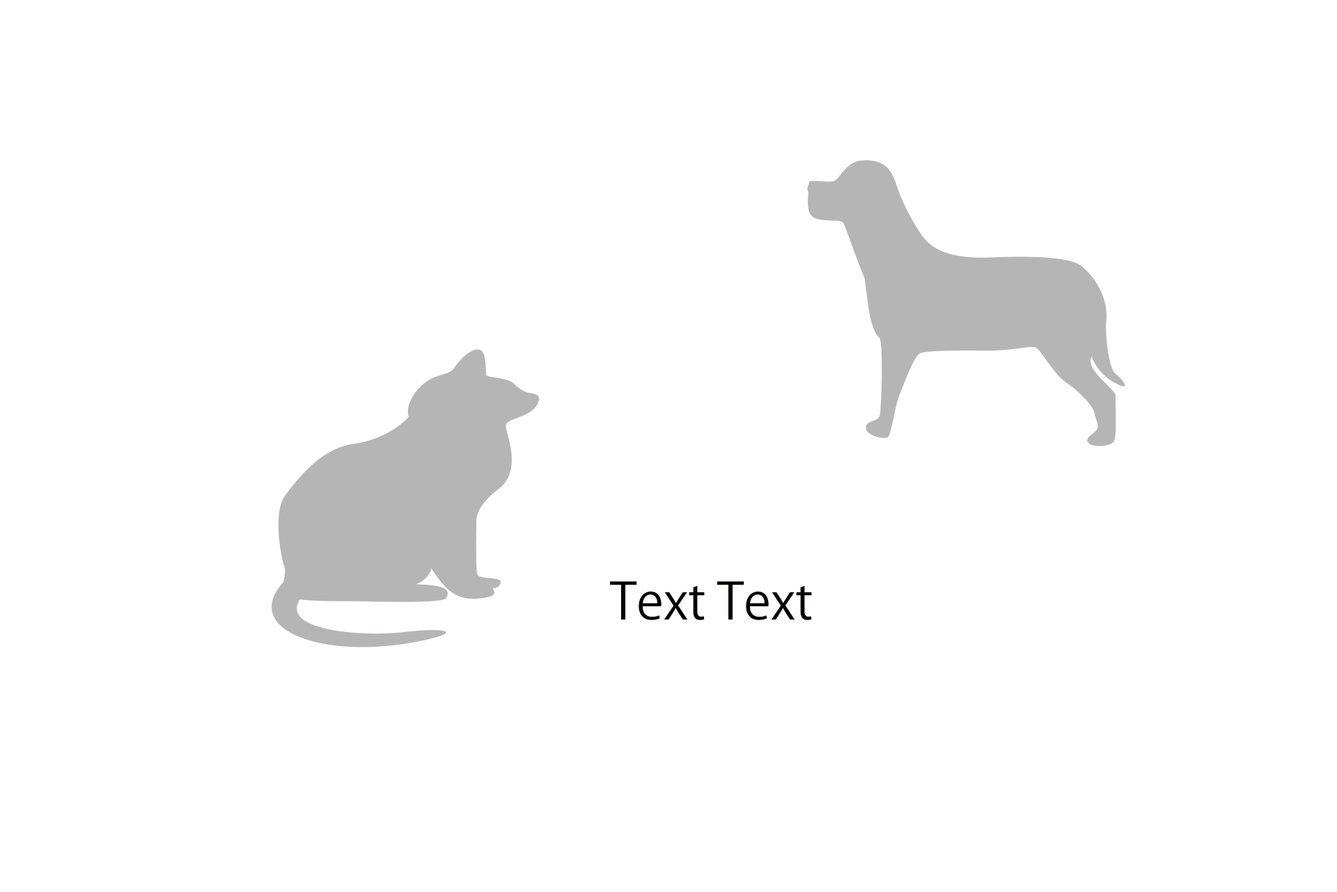
<style>
.page{position:relative;width:1337px;height:892px;background:#ffffff}
.page>*{position:absolute;margin:0}
.t1{font:50.2px "KozGoPr6N-Regular";color:#040000}
</style>
<div class="page">
<p class="t1" style="left:610px;top:581px;width:202px;height:39px">Text Text</p>
</div>
